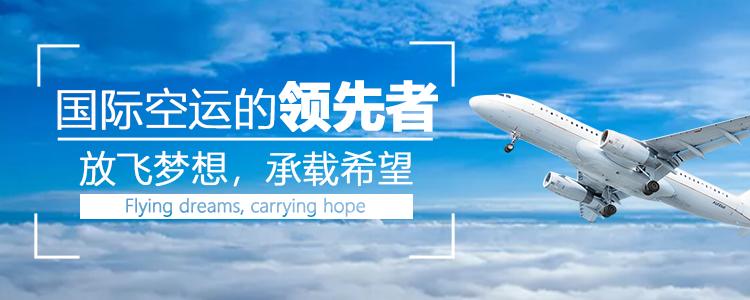
<style>
.page{position:relative;width:750px;height:300px}
.page>*{position:absolute;margin:0}
.t1{font:43.7px "MicrosoftYaHeiLight";color:#ffffff;font-weight:bold}
.t2{font:52.5px "MicrosoftYaHei-Bold";color:#ffffff;font-weight:bold}
.t3{font:36.4px "MicrosoftYaHeiLight";color:#ffffff;font-weight:bold}
</style>
<div class="page">
<p class="t1" style="left:57px;top:80px;width:381px;height:53px">国际空运的<span class="t2">领先者</span></p>
<p class="t3" style="left:79px;top:150px;width:334px;height:37px">放飞梦想，承载希望</p>
</div>
